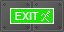
<style>
.page{position:relative;width:64px;height:32px;background:#1de309}
.page>*{position:absolute;margin:0}
.t1{font:10.7px "Helvetica";color:#ffffff}
</style>
<div class="page">
<p class="t1" style="left:15px;top:12px;width:24px;height:8px">EXIT</p>
</div>
